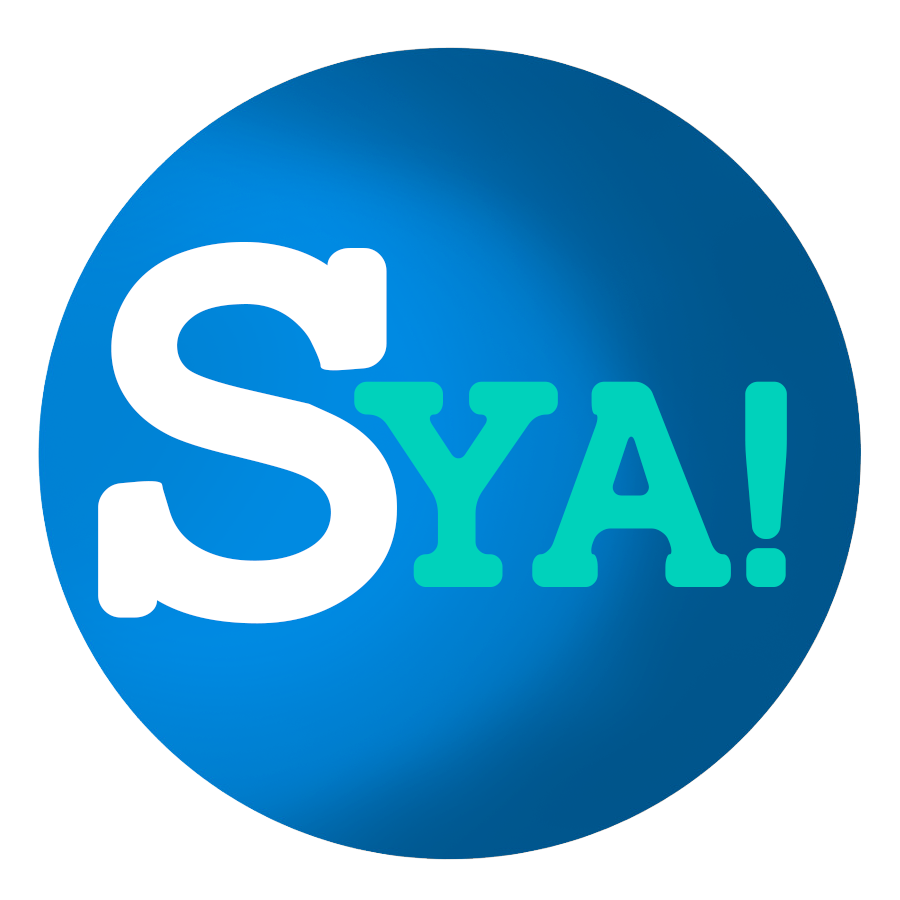
<style>
.page{position:relative;width:900px;height:900px;background:#ffffff}
.page>*{position:absolute;margin:0}
.t1{font:540px "TypoSlabIrregularDemo";color:#ffffff}
.t2{font:300px "TypoSlabIrregularDemo";color:#00d2bb}
</style>
<div class="page">
<p class="t1" style="left:98px;top:241px;width:299px;height:383px">S</p>
<p class="t2" style="left:354px;top:381px;width:433px;height:206px">YA!</p>
</div>
